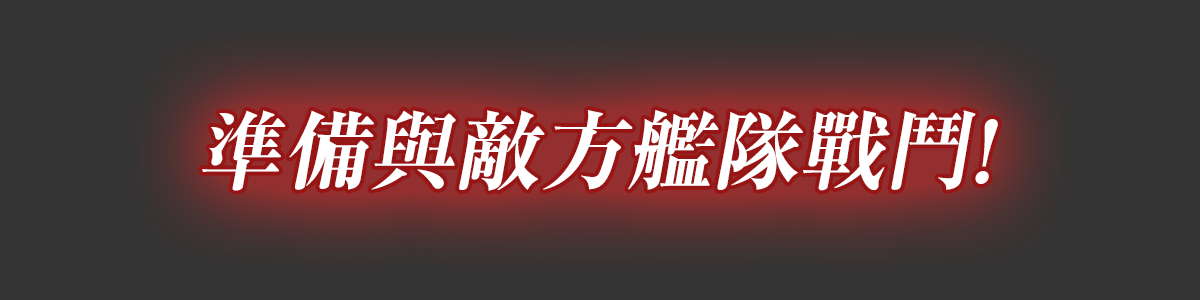
<style>
.page{position:relative;width:1200px;height:300px;background:#333333}
.page>*{position:absolute;margin:0}
.t1{font:86px "RyuminPr6N-ExBold";color:#ffffff;font-style:italic}
</style>
<div class="page">
<p class="t1" style="left:202px;top:110px;width:796px;height:81px">準備與敵方艦隊戰鬥!</p>
</div>
